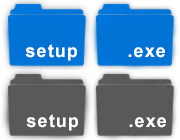
<style>
.page{position:relative;width:180px;height:140px;background:#595959}
.page>*{position:absolute;margin:0}
.t1{font:18px "Arial-BoldMT";letter-spacing:0.06em;color:#ffffff}
.t2{font:18px "Arial-BoldMT";letter-spacing:0.06em;color:#fefefe}
</style>
<div class="page">
<p class="t1" style="left:25px;top:44px;width:52px;height:17px">setup</p>
<p class="t2" style="left:128px;top:47px;width:37px;height:11px">.exe</p>
<p class="t1" style="left:26px;top:114px;width:52px;height:17px">setup</p>
<p class="t1" style="left:129px;top:117px;width:37px;height:11px">.exe</p>
</div>
